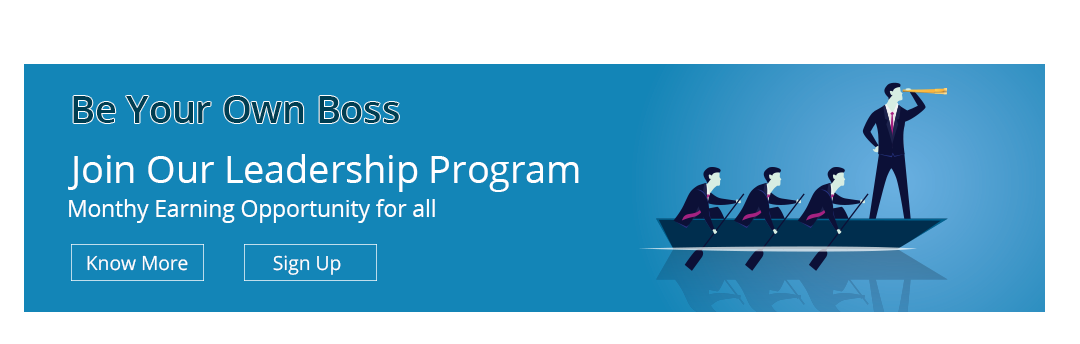
<style>
.page{position:relative;width:1080px;height:344px;background:#1385b7}
.page>*{position:absolute;margin:0}
.t1{font:37.7px "OpenSans-Semibold";color:#003e52}
.t2{font:37.7px "OpenSans";color:#ffffff}
.t3{font:22.7px "OpenSans";color:#ffffff}
.t4{font:19.4px "OpenSans";color:#ffffff}
</style>
<div class="page">
<p class="t1" style="left:73px;top:96px;width:326px;height:27px">Be Your Own Boss</p>
<p class="t2" style="left:68px;top:154px;width:511px;height:38px">Join Our Leadership Program</p>
<p class="t3" style="left:69px;top:199px;width:366px;height:24px">Monthy Earning Opportunity for all</p>
<p class="t4" style="left:87px;top:255px;width:101px;height:16px">Know More</p>
<p class="t4" style="left:273px;top:255px;width:68px;height:20px">Sign Up</p>
</div>
